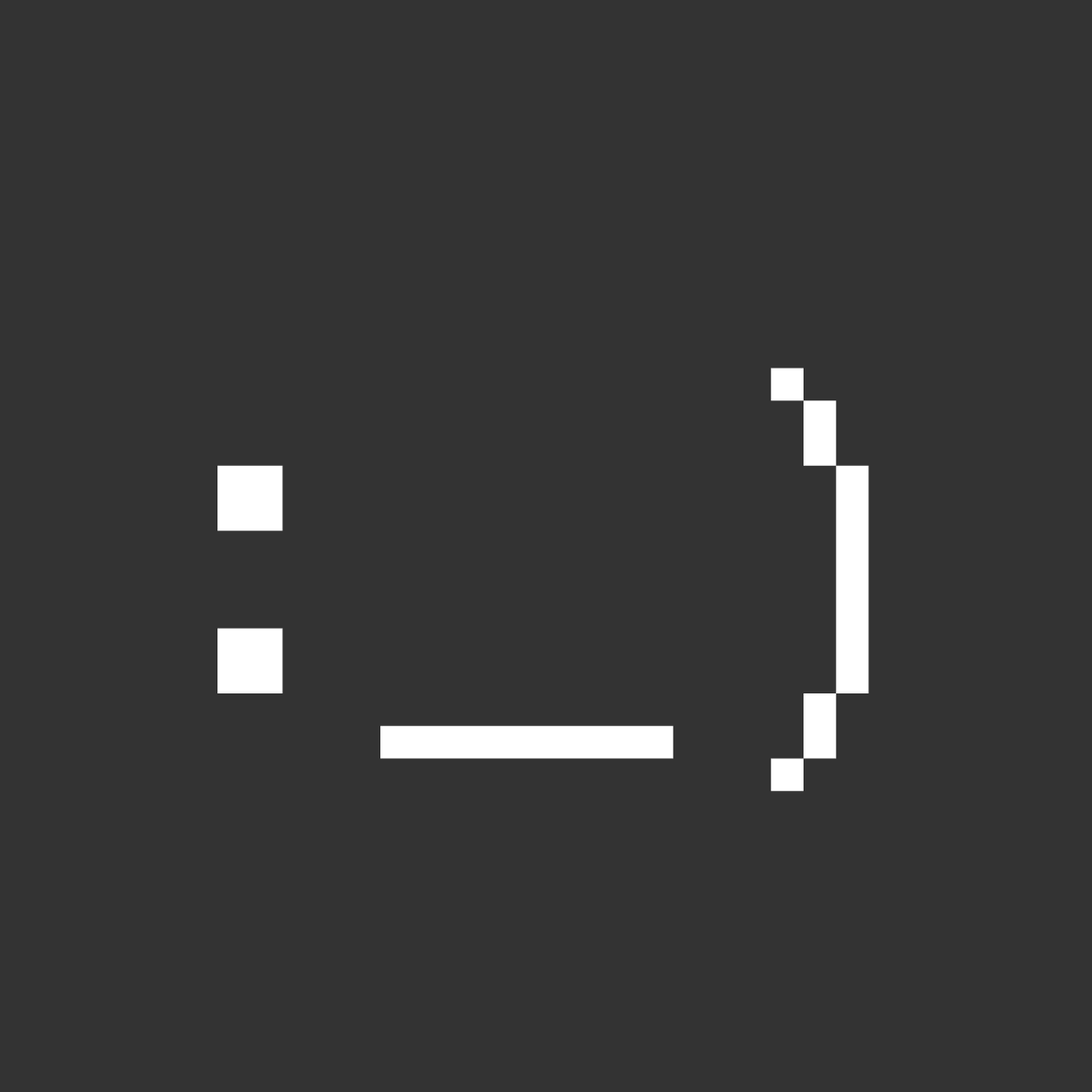
<style>
.page{position:relative;width:1092px;height:1092px;background:#333333}
.page>*{position:absolute;margin:0}
.t1{font:520.5px "Courier";color:#ffffff}
</style>
<div class="page">
<p class="t1" style="left:217px;top:368px;width:652px;height:424px">:_)</p>
</div>
